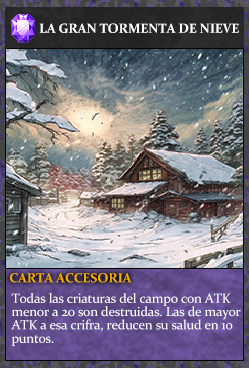
<style>
.page{position:relative;width:249px;height:368px}
.page>*{position:absolute;margin:0}
.t1{font:13.3px "Constantia-Bold";letter-spacing:-0.02em;color:#ffffff}
.t2{font:13.3px "Constantia-Bold";letter-spacing:-0.02em;color:#f2ac05}
.t3{font:13.3px/13.3px "Constantia";letter-spacing:-0.02em;color:#ffffff}
</style>
<div class="page">
<p class="t1" style="left:39px;top:23px;width:200px;height:10px">LA GRAN TORMENTA DE NIEVE</p>
<p class="t2" style="left:10px;top:273px;width:122px;height:10px">CARTA ACCESORIA</p>
<p class="t3" style="left:11px;top:293px;width:230px;height:53px">Todas las criaturas del campo con ATK<br>menor a 20 son destruidas. Las de mayor<br>ATK a esa crifra, reducen su salud en 10<br>puntos.</p>
</div>
